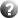
<style>
.page{position:relative;width:18px;height:18px;background:#ffffff}
.page>*{position:absolute;margin:0}
.t1{font:16.1px "Roboto-Bold";color:#ffffff;font-weight:bold}
</style>
<div class="page">
<p class="t1" style="left:5px;top:3px;width:9px;height:13px">?</p>
</div>
